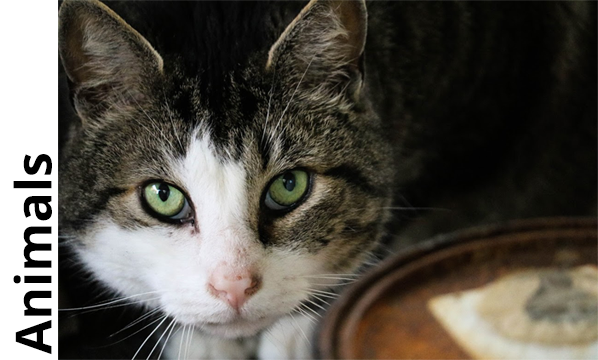
<style>
.page{position:relative;width:598px;height:360px}
.page>*{position:absolute;margin:0}
.t1{font:50px "OpenSans-Bold";color:#000000}
</style>
<div class="page">
<p class="t1" style="left:13px;top:154px;width:39px;height:201px;rotate:-90deg">Animals</p>
</div>
